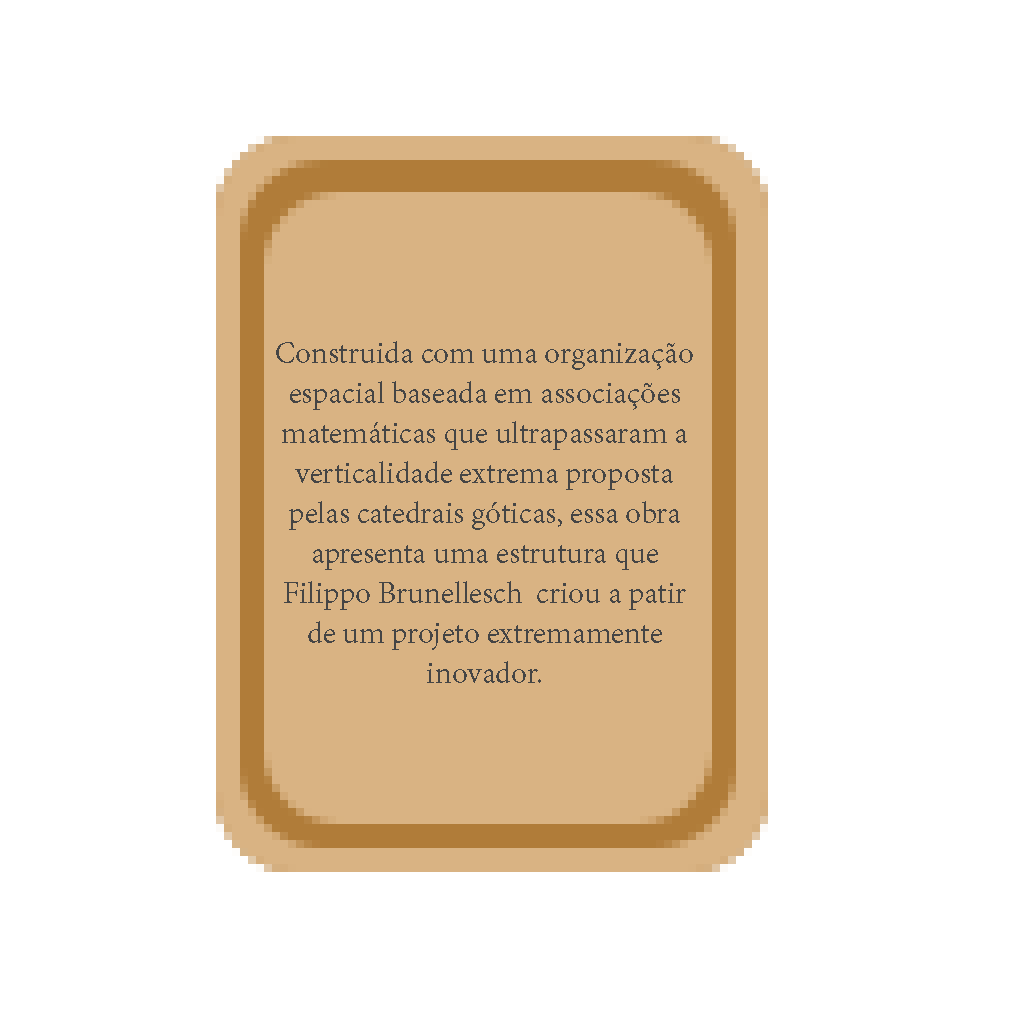
<style>
.page{position:relative;width:1024px;height:1024px;background:#ffffff}
.page>*{position:absolute;margin:0}
.t1{font:33.3px "AdobeDevanagari-Regular";color:#454545}
</style>
<div class="page">
<p class="t1" style="left:276px;top:341px;width:417px;height:342px;text-align:center">Construida com uma organização espacial baseada em associações matemáticas que ultrapassaram a verticalidade extrema proposta pelas catedrais góticas, essa obra apresenta uma estrutura que Filippo Brunellesch  criou a patir de um projeto extremamente inovador.</p>
</div>
